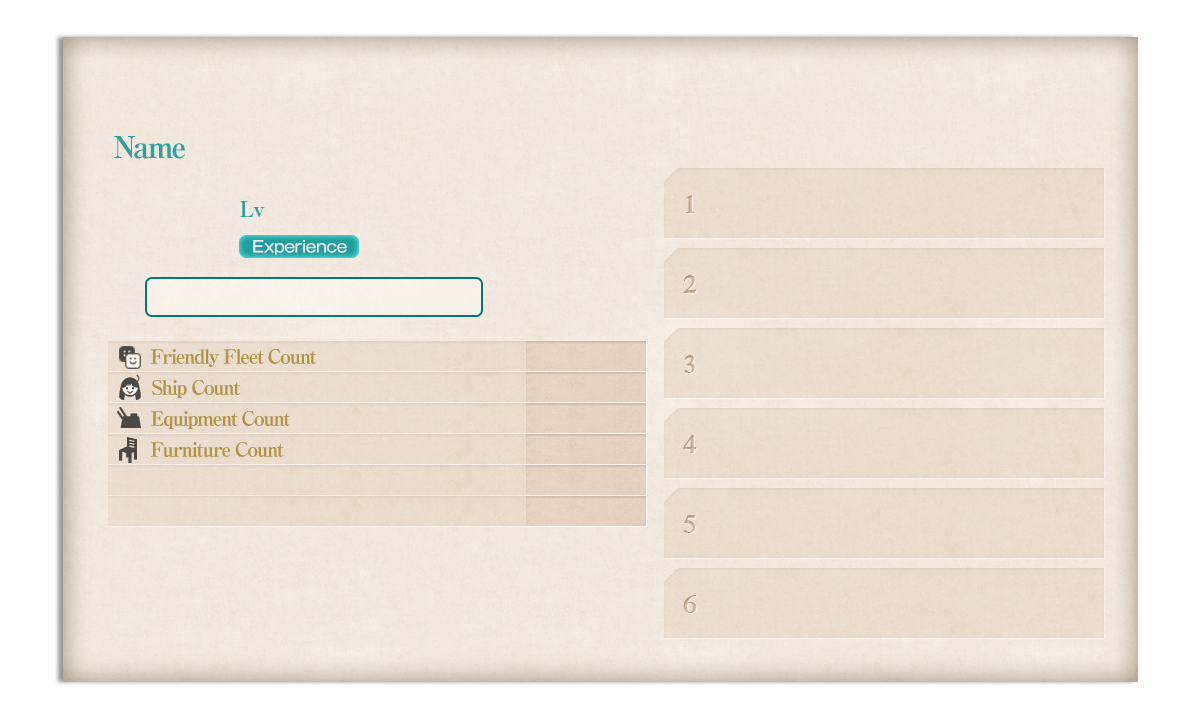
<style>
.page{position:relative;width:1200px;height:721px}
.page>*{position:absolute;margin:0}
.t1{font:30px "RyuminPro-ExBold";letter-spacing:-0.08em;color:#26a3a3}
.t2{font:16px "GothicMB101Pro-Medium";letter-spacing:-0.04em;color:#ebece8}
.t3{font:20px "RyuminPro-ExBold";letter-spacing:-0.08em;color:#af9441}
</style>
<div class="page">
<p class="t1" style="left:114px;top:136px;width:71px;height:23px">Name</p>
<p class="t2" style="left:253px;top:240px;width:94px;height:15px">Experience</p>
<p class="t3" style="left:151px;top:349px;width:166px;height:18px">Friendly Fleet Count</p>
<p class="t3" style="left:152px;top:380px;width:88px;height:18px">Ship Count</p>
<p class="t3" style="left:151px;top:411px;width:139px;height:18px">Equipment Count</p>
<p class="t3" style="left:151px;top:442px;width:133px;height:15px">Furniture Count</p>
</div>
